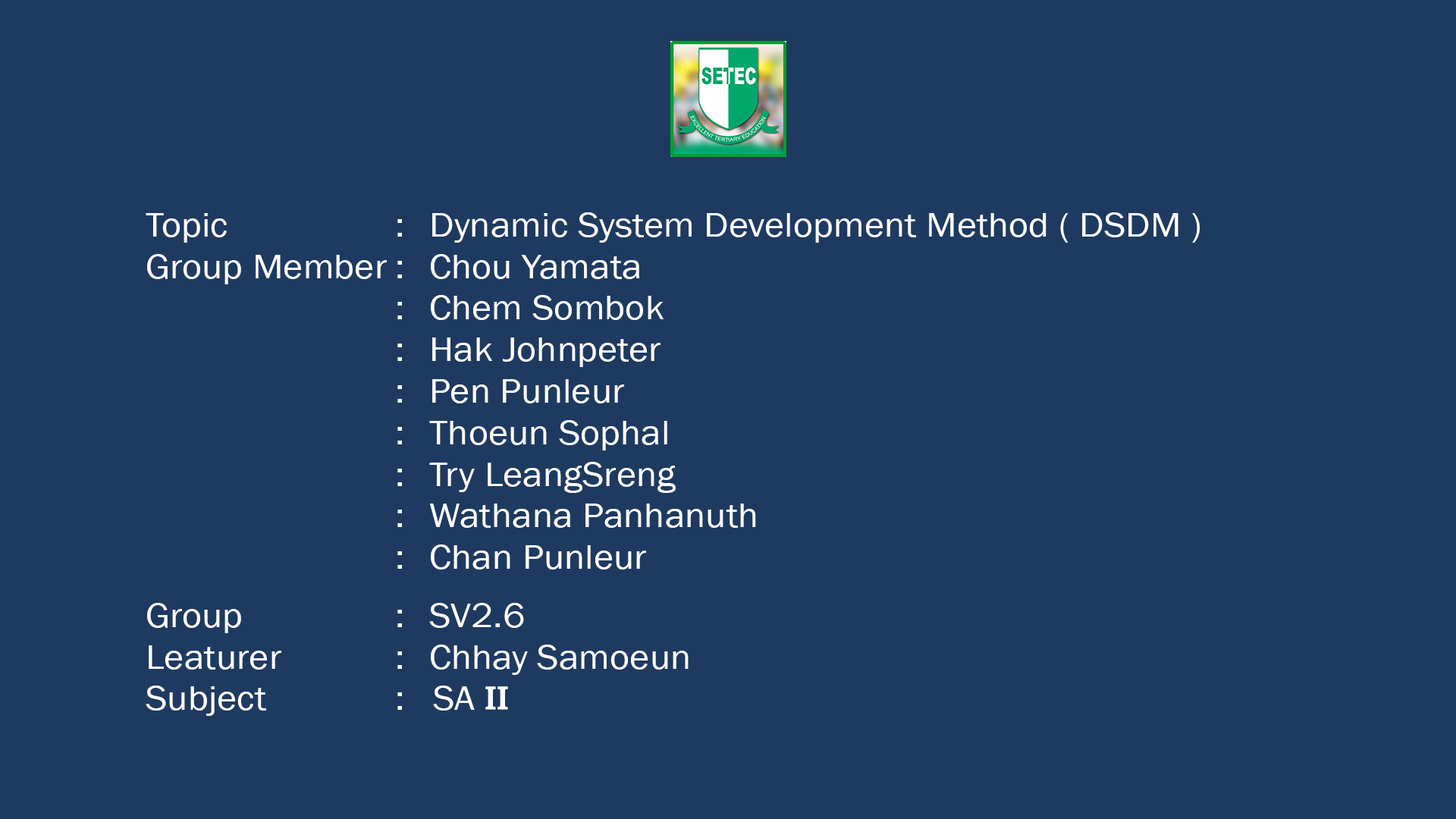
<style>
.page{position:relative;width:1456px;height:819px;background:#1e3a60}
.page>*{position:absolute;margin:0}
.t1{font:34.6px "AA-Khmer-AngDaunPov";color:#ffffff;scale:1.1 1}
.t2{font:34.6px "AKbalthomPheatraC5";color:#ffffff;scale:1.1 1}
</style>
<div class="page">
<p class="t1" style="left:146px;top:212px;width:1054px;height:504px">Topic       :  Dynamic System Development Method ( DSDM )<br>Group Member :  Chou Yamata<br>          :  Chem Sombok<br>          :  Hak Johnpeter<br>          :  Pen Punleur<br>          :  Thoeun Sophal<br>          :  Try LeangSreng<br>          :  Wathana Panhanuth<br>          :  Chan Punleur<br><br>Group       :  SV2.6<br>Leaturer     :  Chhay Samoeun<br>Subject      :   SA <span class="t2">II</span></p>
</div>
